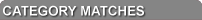
<style>
.page{position:relative;width:202px;height:20px;background:#858585}
.page>*{position:absolute;margin:0}
.t1{font:13.3px "Arial-BoldMT";color:#ffffff}
</style>
<div class="page">
<p class="t1" style="left:3px;top:5px;width:141px;height:11px">CATEGORY MATCHES</p>
</div>
